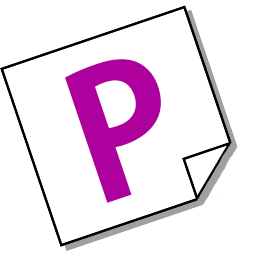
<style>
.page{position:relative;width:256px;height:256px;background:#ffffff}
.page>*{position:absolute;margin:0}
.t1{font:174.1px "AdobeGothicStd-Bold";color:#ae009c}
</style>
<div class="page">
<p class="t1" style="left:64px;top:59px;width:97px;height:144px;rotate:-19deg">P</p>
</div>
